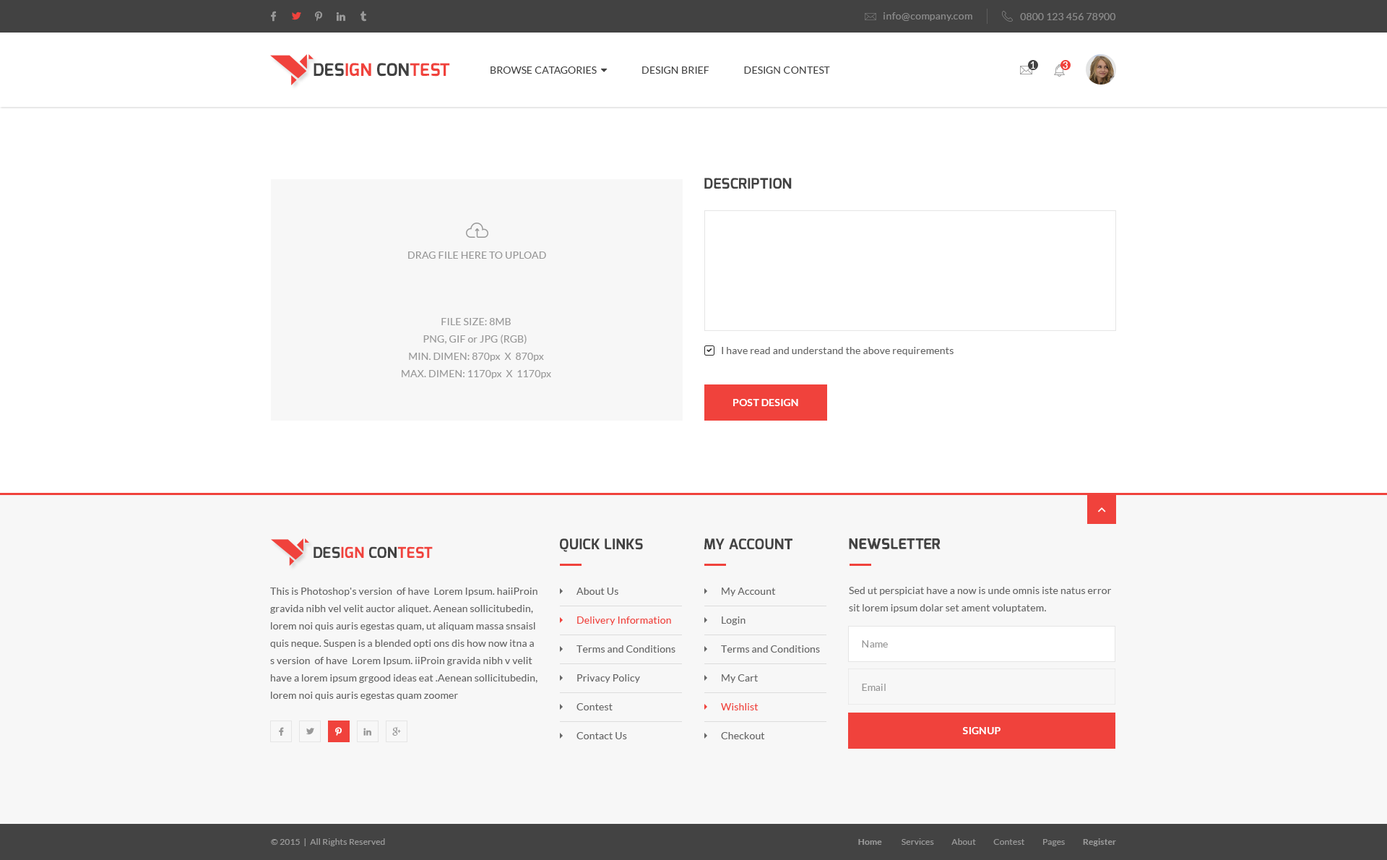
<style>
.page{position:relative;width:1387px;height:860px;background:#ffffff}
.page>*{position:absolute;margin:0}
.t1{font:10.1px "Lato-Regular";letter-spacing:0.012em;color:#999999}
.t2{font:17.3px "Exo-Bold";letter-spacing:0.012em;color:#f0423c;text-transform:uppercase}
.t3{font:17.3px "Exo-Bold";letter-spacing:0.012em;color:#424242;text-transform:uppercase}
.t4{font:9.4px "Lato-Medium";color:#ffffff}
.t5{font:14.4px "Exo-Bold";letter-spacing:0.012em;color:#424242;text-transform:uppercase}
.t6{font:10.1px "Lato-Regular";letter-spacing:0.012em;color:#999999;text-transform:uppercase}
.t7{font:10.1px/17.3px "Lato-Regular";letter-spacing:0.012em;color:#999999}
.t8{font:10.1px/17.3px "Lato-Regular";letter-spacing:0.012em;color:#999999;text-transform:uppercase}
.t9{font:10.1px "Lato-Regular";letter-spacing:0.012em;color:#666666}
.t10{font:10.1px "Lato-Bold";letter-spacing:0.012em;color:#ffffff;text-transform:uppercase}
.t11{font:14.4px "Exo-Bold";letter-spacing:0.012em;color:#434343;text-transform:uppercase}
.t12{font:15px "Exo-Bold";letter-spacing:0.012em;color:#f0423c;text-transform:uppercase}
.t13{font:15px "Exo-Bold";letter-spacing:0.012em;color:#424242;text-transform:uppercase}
.t14{font:10.1px/17.3px "Lato-Regular";letter-spacing:0.012em;color:#666666}
.t15{font:10.1px/14.4px "Lato-Regular";letter-spacing:0.012em;color:#666666}
.t16{font:10.1px/14.4px "Lato-Regular";letter-spacing:0.012em;color:#f0423c}
.t17{font:8.7px "Lato-Regular";letter-spacing:0.012em;color:#999999}
.t18{font:8.7px "Lato-Bold";letter-spacing:0.012em;color:#999999}
</style>
<div class="page">
<p class="t1" style="left:884px;top:12px;width:88px;height:9px;opacity:0.8">info@company.com</p>
<p class="t1" style="left:1020px;top:13px;width:96px;height:7px;opacity:0.8">0800 123 456 78900</p>
<p class="t2" style="left:314px;top:63px;width:136px;height:14px"><span class="t3">Des</span>ign <span class="t3">Con</span>test</p>
<p class="t4" style="left:1030px;top:61px;width:5px;height:8px">1</p>
<p class="t4" style="left:1063px;top:61px;width:5px;height:8px">3</p>
<p class="t5" style="left:704px;top:178px;width:88px;height:11px">Description</p>
<p class="t6" style="left:408px;top:251px;width:138px;height:8px">Drag file here to upload</p>
<p class="t7" style="left:402px;top:318px;width:149px;height:61px;text-align:center"><span class="t8">File Size: 8mb<br></span>PNG, GIF or JPG (RGB) <br><span class="t8">Min. Dimen: 870</span>px<span class="t8">  x  870</span>px<br><span class="t8">Max. Dimen: 1170</span>px<span class="t8">  x  1170</span>px</p>
<p class="t9" style="left:722px;top:347px;width:232px;height:8px">I have read and understand the above requirements</p>
<p class="t10" style="left:733px;top:399px;width:65px;height:7px">Post Design</p>
<p class="t5" style="left:560px;top:538px;width:83px;height:14px">Quick Links</p>
<p class="t11" style="left:704px;top:538px;width:89px;height:11px">My Account</p>
<p class="t11" style="left:849px;top:537px;width:92px;height:12px">Newsletter</p>
<p class="t12" style="left:314px;top:546px;width:119px;height:12px"><span class="t13">Des</span>ign <span class="t13">Con</span>test</p>
<p class="t14" style="left:270px;top:587px;width:267px;height:113px">This is Photoshop's version  of have  Lorem Ipsum. haiiProin gravida nibh vel velit auctor aliquet. Aenean sollicitubedin, lorem noi quis auris egestas quam, ut aliquam massa snsaisl quis neque. Suspen is a blended opti ons dis how now itna a<br>s version  of have  Lorem Ipsum. iiProin gravida nibh v velit  have a lorem ipsum grgood ideas eat .Aenean sollicitubedin, lorem noi quis auris egestas quam zoomer</p>
<p class="t15" style="left:576px;top:587px;width:99px;height:152px">About Us<br><br><span class="t16">Delivery Information<br></span><br>Terms and Conditions<br><br>Privacy Policy<br><br>Contest<br><br>Contact Us</p>
<p class="t15" style="left:721px;top:587px;width:99px;height:152px">My Account<br><br>Login<br><br>Terms and Conditions<br><br>My Cart<br><br><span class="t16">Wishlist<br></span><br>Checkout</p>
<p class="t14" style="left:849px;top:587px;width:263px;height:26px">Sed ut perspiciat have a now is unde omnis iste natus error sit lorem ipsum dolar set ament voluptatem.</p>
<p class="t1" style="left:862px;top:640px;width:26px;height:7px">Name</p>
<p class="t1" style="left:862px;top:683px;width:24px;height:8px">Email</p>
<p class="t10" style="left:962px;top:727px;width:39px;height:7px">Signup</p>
<p class="t17" style="left:271px;top:838px;width:114px;height:8px">© 2015  |  All Rights Reserved</p>
<p class="t17" style="left:858px;top:838px;width:258px;height:8px"><span class="t18">Home           </span>Services          About          Contest          Pages          <span class="t18">Register</span></p>
</div>
